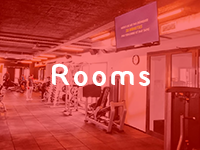
<style>
.page{position:relative;width:200px;height:150px}
.page>*{position:absolute;margin:0}
.t1{font:30px "Fontastique-Fontastique";letter-spacing:0.1em;color:#ffffff}
</style>
<div class="page">
<p class="t1" style="left:52px;top:63px;width:98px;height:23px">Rooms</p>
</div>
